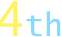
<style>
.page{position:relative;width:62px;height:37px;background:#ffffff}
.page>*{position:absolute;margin:0}
.t1{font:32px "LucidaSans-Typewriter"}
.t2{font:48px "LucidaSans-Typewriter"}
</style>
<div class="page">
<p class="t1" style="left:0px;top:1px;width:61px;height:36px"><span class="t2">4</span>th</p>
</div>
